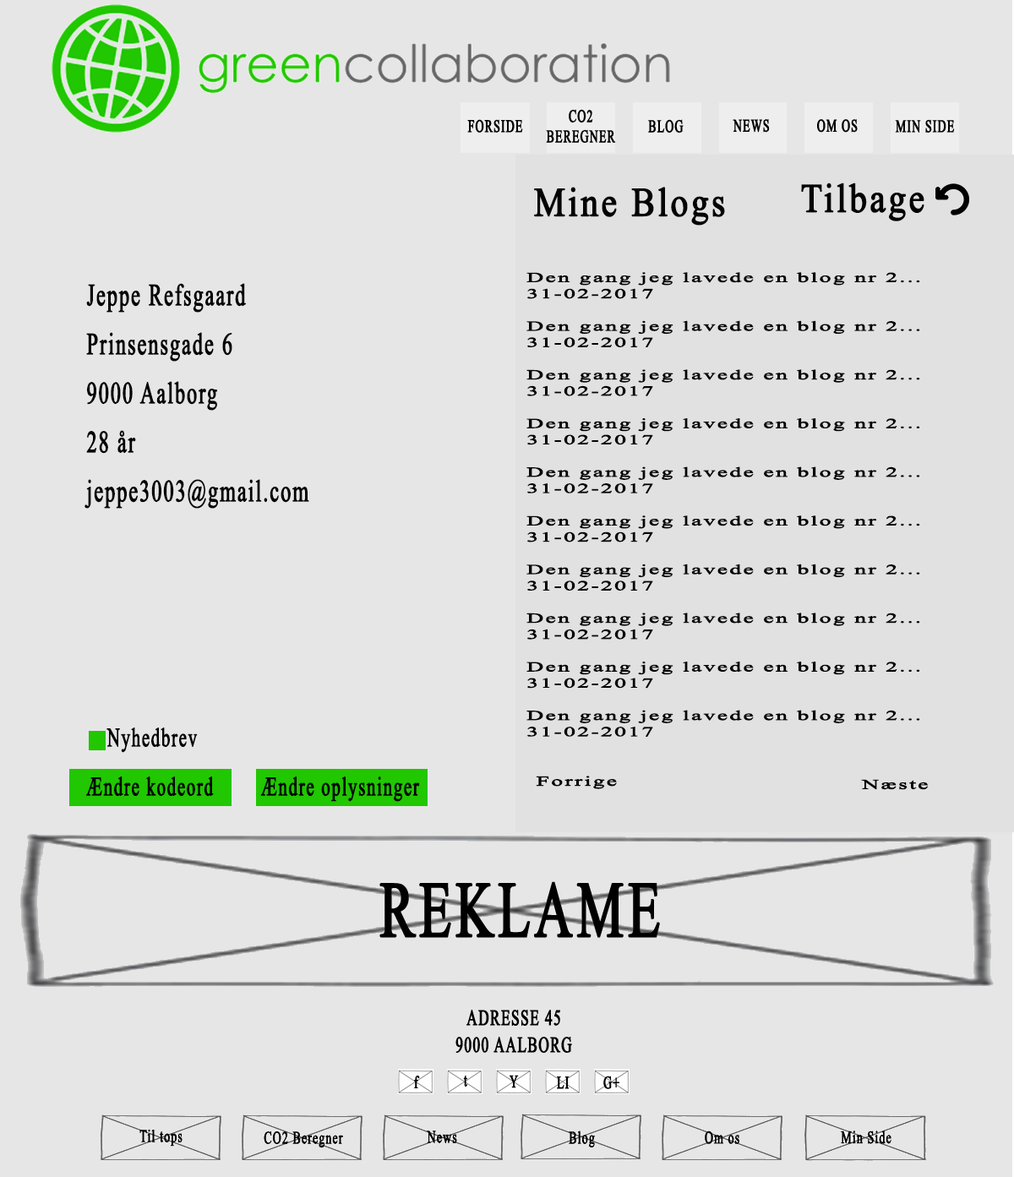
<style>
.page{position:relative;width:1014px;height:1177px;background:#e6e6e6}
.page>*{position:absolute;margin:0}
.t1{font:40.5px "TimesNewRomanPSMT";letter-spacing:0.06em;color:#030303;font-weight:bold;scale:0.86 1}
.t2{font:13.5px "TimesNewRomanPSMT";letter-spacing:0.06em;color:#030303;font-weight:bold;scale:1.72 1}
.t3{font:30.7px/49px "TimesNewRomanPSMT";letter-spacing:0.06em;color:#030303;font-weight:bold;scale:0.66 1}
.t4{font:26.4px/20.3px "TimesNewRomanPSMT";letter-spacing:0.06em;color:#030303;font-weight:bold;scale:0.66 1}
.t5{font:26.4px/49px "TimesNewRomanPSMT";letter-spacing:0.06em;color:#030303;font-weight:bold;scale:0.66 1}
</style>
<div class="page">
<p class="t1" style="left:801px;top:182px;width:123px;height:39px">Tilbage</p>
<p class="t1" style="left:534px;top:187px;width:191px;height:39px">Mine Blogs</p>
<p class="t2" style="left:526px;top:272px;width:394px;height:464px">Den gang jeg lavede en blog nr 2...<br>31-02-2017<br><br>Den gang jeg lavede en blog nr 2...<br>31-02-2017<br><br>Den gang jeg lavede en blog nr 2...<br>31-02-2017<br><br>Den gang jeg lavede en blog nr 2...<br>31-02-2017<br><br>Den gang jeg lavede en blog nr 2...<br>31-02-2017<br><br>Den gang jeg lavede en blog nr 2...<br>31-02-2017<br><br>Den gang jeg lavede en blog nr 2...<br>31-02-2017<br><br>Den gang jeg lavede en blog nr 2...<br>31-02-2017<br><br>Den gang jeg lavede en blog nr 2...<br>31-02-2017<br><br>Den gang jeg lavede en blog nr 2...<br>31-02-2017</p>
<p class="t3" style="left:84px;top:283px;width:336px;height:519px"><span class="t4"><br><br></span>Jeppe Refsgaard<br>Prinsensgade 6<br>9000 Aalborg<br>28 år<br>jeppe3003@gmail.com<br><br><br><br><br>   <span class="t5">Nyhedbrev<br>Ændre kodeord        Ændre oplysninger</span></p>
<p class="t2" style="left:535px;top:775px;width:82px;height:14px">Forrige</p>
<p class="t2" style="left:861px;top:779px;width:67px;height:11px">Næste</p>
</div>
